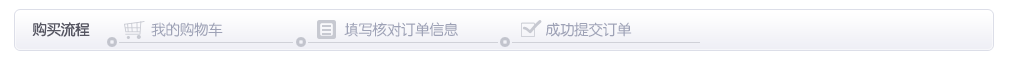
<style>
.page{position:relative;width:1013px;height:64px;background:#ffffff}
.page>*{position:absolute;margin:0}
.t1{font:15px "HYe3gj";letter-spacing:-0.05em;color:#565662}
.t2{font:15px "HYe3gj";letter-spacing:-0.05em;color:#9ea2b6}
</style>
<div class="page">
<p class="t1" style="left:32px;top:22px;width:58px;height:15px">购买流程</p>
<p class="t2" style="left:151px;top:22px;width:481px;height:15px">我的购物车                  填写核对订单信息             成功提交订单</p>
</div>
